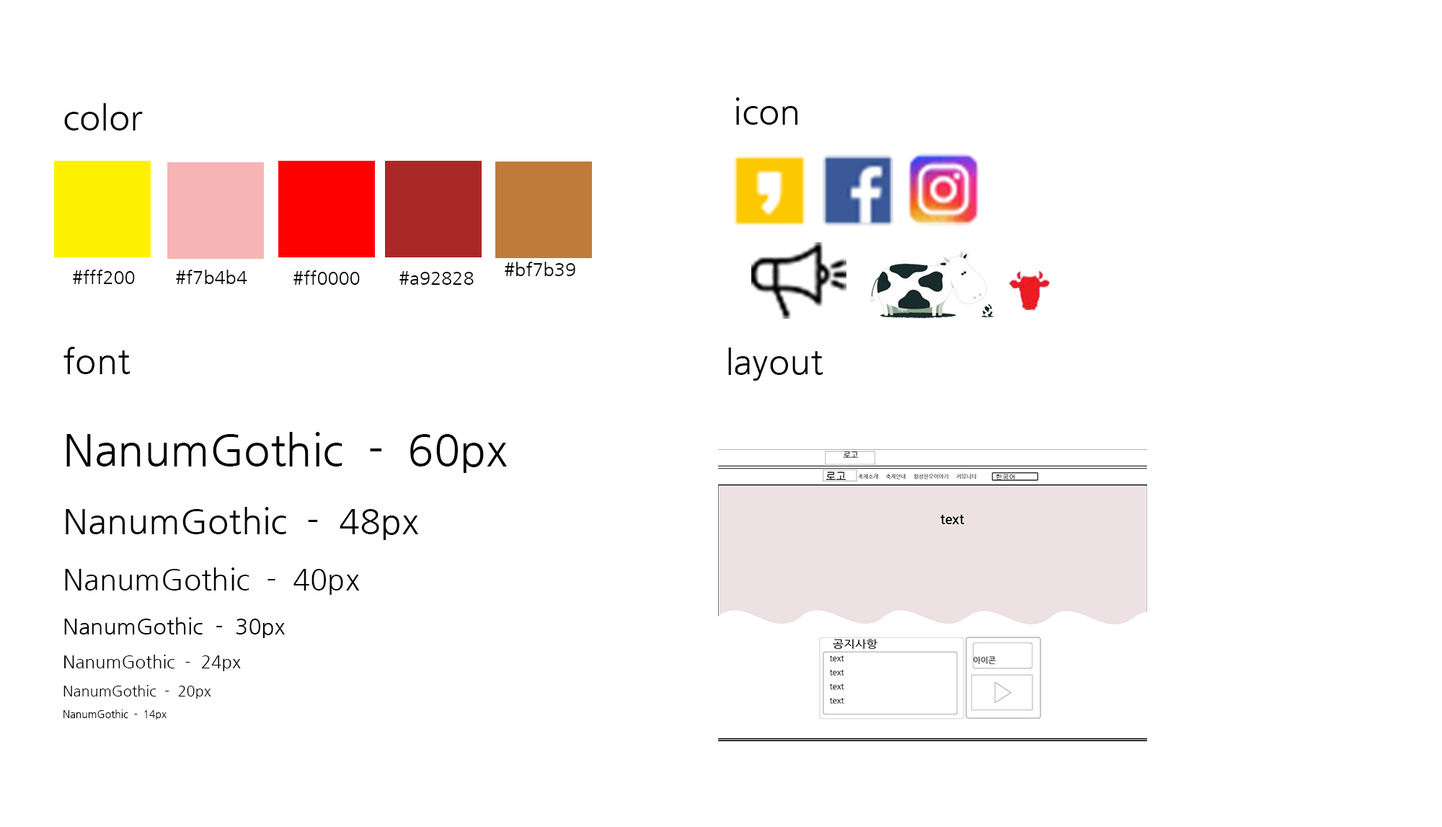
<style>
.page{position:relative;width:1442px;height:827px;background:#ffffff}
.page>*{position:absolute;margin:0}
.t1{font:34.6px "NanumGothic";color:#000000}
.t2{font:18px "NanumGothic";color:#000000}
.t3{font:43.3px "NanumGothic";color:#000000}
.t4{font:28.8px "NanumGothic";color:#000000}
.t5{font:21.6px "NanumGothic";color:#000000}
.t6{font:17.3px "NanumGothic";color:#000000}
.t7{font:14.4px "NanumGothic";color:#000000}
.t8{font:10.1px "NanumGothic";color:#000000}
</style>
<div class="page">
<p class="t1" style="left:735px;top:97px;width:62px;height:28px">icon</p>
<p class="t1" style="left:64px;top:103px;width:79px;height:27px">color</p>
<p class="t2" style="left:73px;top:270px;width:62px;height:14px">#fff200</p>
<p class="t2" style="left:176px;top:270px;width:71px;height:14px">#f7b4b4</p>
<p class="t2" style="left:505px;top:262px;width:70px;height:14px">#bf7b39</p>
<p class="t2" style="left:293px;top:270px;width:67px;height:15px">#ff0000</p>
<p class="t2" style="left:399px;top:271px;width:75px;height:14px">#a92828</p>
<p class="t1" style="left:63px;top:347px;width:67px;height:27px">font</p>
<p class="t1" style="left:728px;top:348px;width:95px;height:33px">layout</p>
<p class="t3" style="left:63px;top:432px;width:444px;height:288px">NanumGothic  -  60px<br><span class="t1">NanumGothic  -  48px<br></span><span class="t4">NanumGothic  -  40px<br></span><span class="t5">NanumGothic  -  30px<br></span><span class="t6">NanumGothic  -  24px<br></span><span class="t7">NanumGothic  -  20px<br></span><span class="t8">NanumGothic  -  14px</span></p>
</div>
